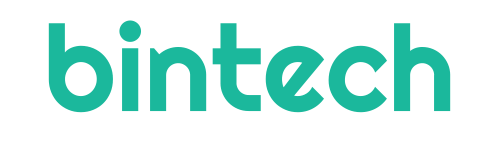
<style>
.page{position:relative;width:500px;height:150px;background:#ffffff}
.page>*{position:absolute;margin:0}
.t1{font:120px "Righteous-Regular";color:#1bb89c}
</style>
<div class="page">
<p class="t1" style="left:48px;top:20px;width:403px;height:93px">bintech</p>
</div>
